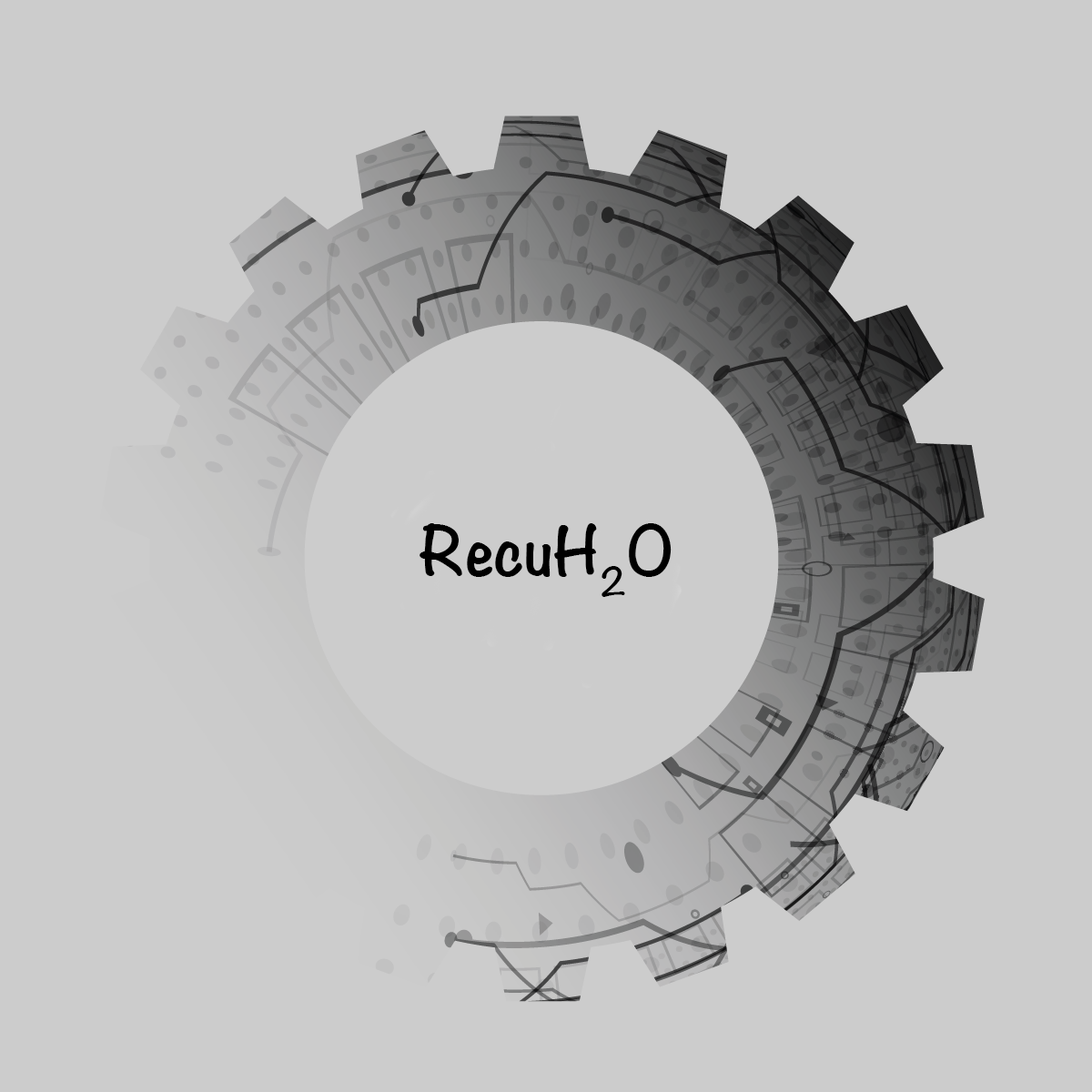
<style>
.page{position:relative;width:1092px;height:1092px;background:#cccccc}
.page>*{position:absolute;margin:0}
.t1{font:60.7px "Noteworthy-Bold";color:#000000}
</style>
<div class="page">
<p class="t1" style="left:420px;top:523px;width:252px;height:74px">RecuH2O</p>
</div>
